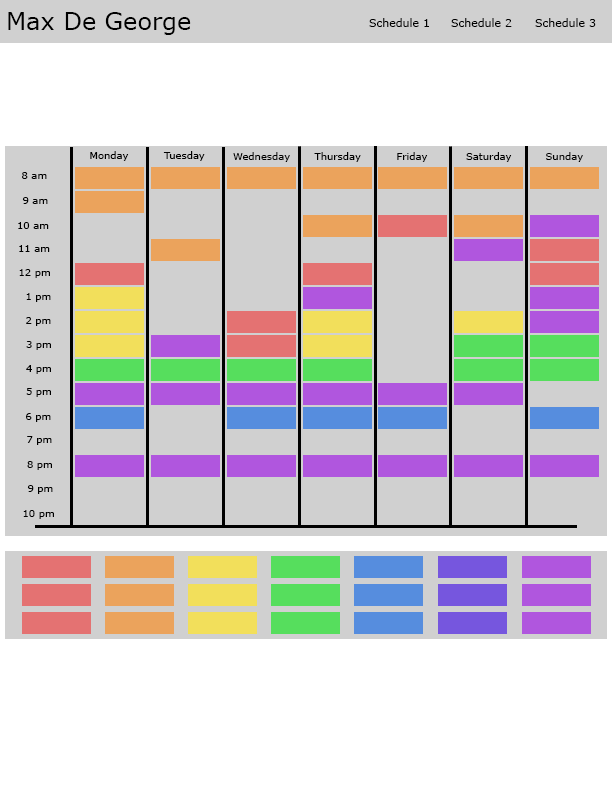
<style>
.page{position:relative;width:612px;height:792px;background:#ffffff}
.page>*{position:absolute;margin:0}
.t1{font:24px "Verdana";color:#000000}
.t2{font:11.1px "Verdana";color:#000000}
.t3{font:10px "Verdana";color:#000000}
</style>
<div class="page">
<p class="t1" style="left:8px;top:12px;width:183px;height:23px">Max De George</p>
<p class="t2" style="left:369px;top:18px;width:60px;height:9px">Schedule 1</p>
<p class="t2" style="left:451px;top:18px;width:61px;height:9px">Schedule 2</p>
<p class="t2" style="left:535px;top:18px;width:61px;height:9px">Schedule 3</p>
<p class="t3" style="left:90px;top:151px;width:39px;height:10px">Monday</p>
<p class="t3" style="left:163px;top:151px;width:42px;height:10px">Tuesday</p>
<p class="t3" style="left:233px;top:152px;width:57px;height:10px">Wednesday</p>
<p class="t3" style="left:314px;top:152px;width:47px;height:10px">Thursday</p>
<p class="t3" style="left:397px;top:152px;width:31px;height:10px">Friday</p>
<p class="t3" style="left:466px;top:152px;width:46px;height:10px">Saturday</p>
<p class="t3" style="left:546px;top:152px;width:37px;height:10px">Sunday</p>
<p class="t3" style="left:22px;top:172px;width:25px;height:7px">8 am</p>
<p class="t3" style="left:22px;top:197px;width:26px;height:7px">9 am</p>
<p class="t3" style="left:18px;top:222px;width:31px;height:7px">10 am</p>
<p class="t3" style="left:19px;top:245px;width:31px;height:7px">11 am</p>
<p class="t3" style="left:19px;top:269px;width:31px;height:9px">12 pm</p>
<p class="t3" style="left:26px;top:293px;width:25px;height:9px">1 pm</p>
<p class="t3" style="left:26px;top:317px;width:25px;height:9px">2 pm</p>
<p class="t3" style="left:26px;top:341px;width:25px;height:9px">3 pm</p>
<p class="t3" style="left:26px;top:365px;width:25px;height:9px">4 pm</p>
<p class="t3" style="left:26px;top:388px;width:25px;height:9px">5 pm</p>
<p class="t3" style="left:26px;top:413px;width:25px;height:9px">6 pm</p>
<p class="t3" style="left:27px;top:436px;width:25px;height:9px">7 pm</p>
<p class="t3" style="left:27px;top:461px;width:25px;height:9px">8 pm</p>
<p class="t3" style="left:27px;top:485px;width:26px;height:9px">9 pm</p>
<p class="t3" style="left:23px;top:510px;width:31px;height:9px">10 pm</p>
</div>
